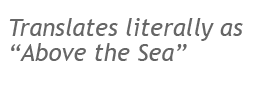
<style>
.page{position:relative;width:280px;height:100px;background:#ffffff}
.page>*{position:absolute;margin:0}
.t1{font:24px/25px "TrebuchetMS-Italic";color:#666666}
</style>
<div class="page">
<p class="t1" style="left:9px;top:18px;width:234px;height:43px">Translates literally as<br>“Above the Sea”</p>
</div>
